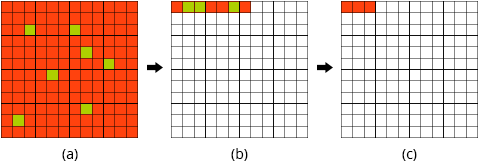
<style>
.page{position:relative;width:479px;height:162px;background:#ffffff}
.page>*{position:absolute;margin:0}
.t1{font:14px "OpenSans";color:#000000}
</style>
<div class="page">
<p class="t1" style="left:62px;top:149px;width:16px;height:12px">(a)</p>
<p class="t1" style="left:231px;top:148px;width:17px;height:13px">(b)</p>
<p class="t1" style="left:402px;top:149px;width:15px;height:12px">(c)</p>
</div>
